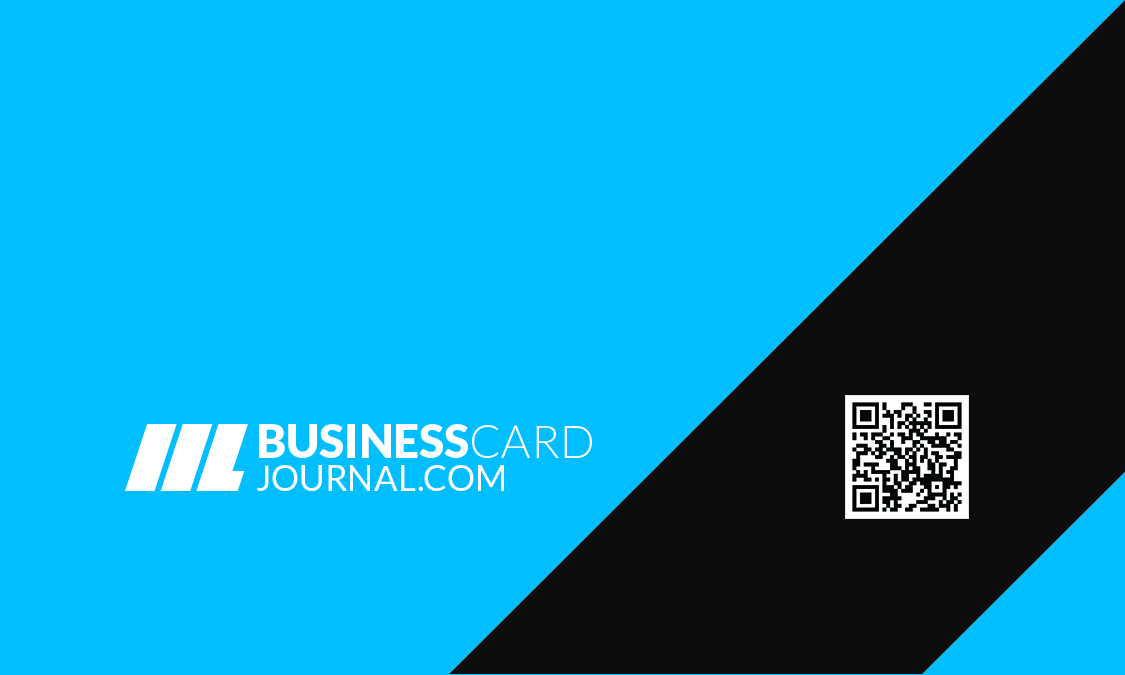
<style>
.page{position:relative;width:1125px;height:675px;background:#00beff}
.page>*{position:absolute;margin:0}
.t1{font:35px/33.3px "Lato-Regular";color:#ffffff}
.t2{font:45.8px/33.3px "Lato-Black";color:#ffffff}
.t3{font:45.8px/33.3px "Lato-Light";color:#ffffff}
</style>
<div class="page">
<p class="t1" style="left:257px;top:424px;width:335px;height:67px"><span class="t2">BUSINESS</span><span class="t3">CARD<br></span>JOURNAL.COM</p>
</div>
